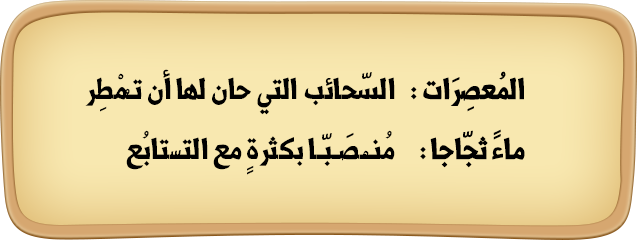
<style>
.page{position:relative;width:637px;height:240px;background:#f8e8b0}
.page>*{position:absolute;margin:0}
.t1{font:36px "Shorooq_N1";color:#000000}
</style>
<div class="page">
<p class="t1" style="left:85px;top:69px;width:310px;height:46px">السّحائب التي حان لها أن تـُمْطِر</p>
<p class="t1" style="left:411px;top:71px;width:113px;height:41px">: المُعصِرَات</p>
<p class="t1" style="left:126px;top:130px;width:269px;height:45px">مُنـْـصَـبّـا بكثرةٍ مع التـّـتابُع</p>
<p class="t1" style="left:420px;top:129px;width:105px;height:39px">: ماءً ثجّاجا</p>
</div>
